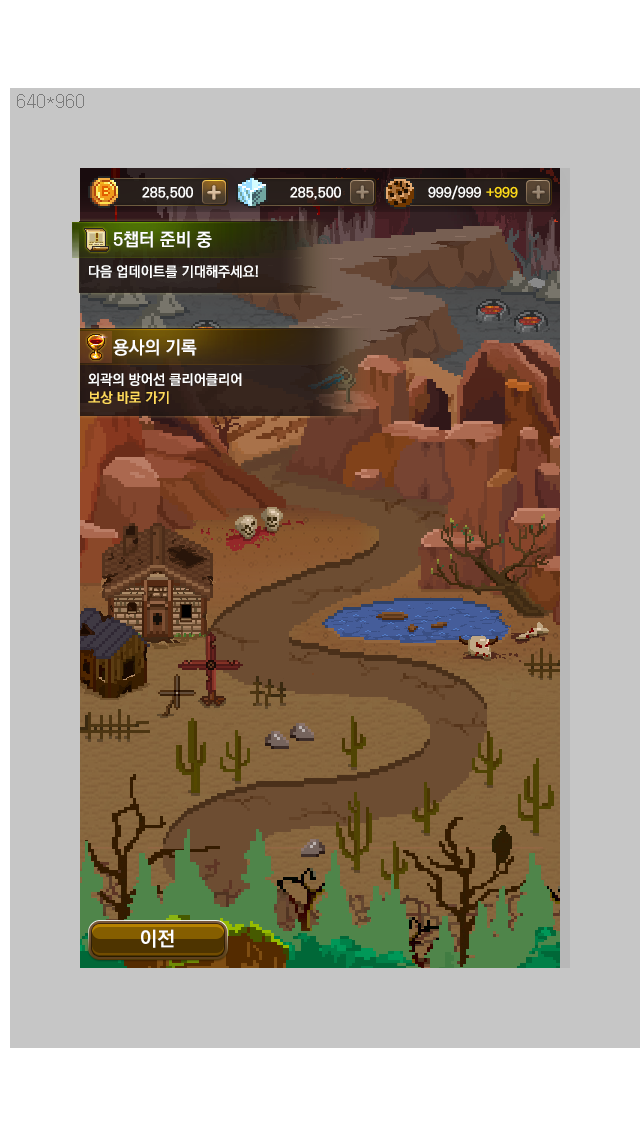
<style>
.page{position:relative;width:640px;height:1136px;background:#c6c6c6}
.page>*{position:absolute;margin:0}
.t1{font:18px "KoPubDotumBold";color:#ffffff}
.t2{font:14px "KoPubDotumBold";color:#ffffff}
.t3{font:14px "KoPubDotumBold";color:#ffda5b}
</style>
<div class="page">
<p class="t1" style="left:113px;top:231px;width:99px;height:17px">5챕터 준비 중</p>
<p class="t2" style="left:89px;top:265px;width:169px;height:13px">다음 업데이트를 기대해주세요!</p>
<p class="t1" style="left:113px;top:339px;width:84px;height:17px">용사의 기록</p>
<p class="t2" style="left:88px;top:373px;width:154px;height:13px">외곽의 방어선 클리어클리어</p>
<p class="t3" style="left:88px;top:391px;width:81px;height:13px">보상 바로 가기</p>
</div>
